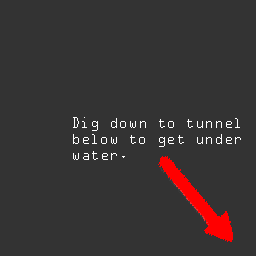
<style>
.page{position:relative;width:256px;height:256px;background:#333333}
.page>*{position:absolute;margin:0}
.t1{font:13.3px "OCRAStd";color:#ffffff}
</style>
<div class="page">
<p class="t1" style="left:73px;top:117px;width:168px;height:43px">Dig down to tunnel<br>below to get under<br>water.</p>
</div>
